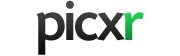
<style>
.page{position:relative;width:180px;height:56px;background:#ffffff}
.page>*{position:absolute;margin:0}
.t1{font:60px "TodaySHOP-Medium";letter-spacing:-0.025em;color:#2c2c2c}
.t2{font:60px "TodaySHOP-Medium";letter-spacing:-0.025em}
</style>
<div class="page">
<p class="t1" style="left:36px;top:0px;width:89px;height:55px">picx</p>
<p class="t2" style="left:123px;top:12px;width:21px;height:28px">r</p>
</div>
